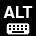
<style>
.page{position:relative;width:36px;height:36px;background:#000000}
.page>*{position:absolute;margin:0}
.t1{font:16px "Swiss721BT-Bold";color:#ffffff}
</style>
<div class="page">
<p class="t1" style="left:3px;top:6px;width:30px;height:12px">ALT</p>
</div>
